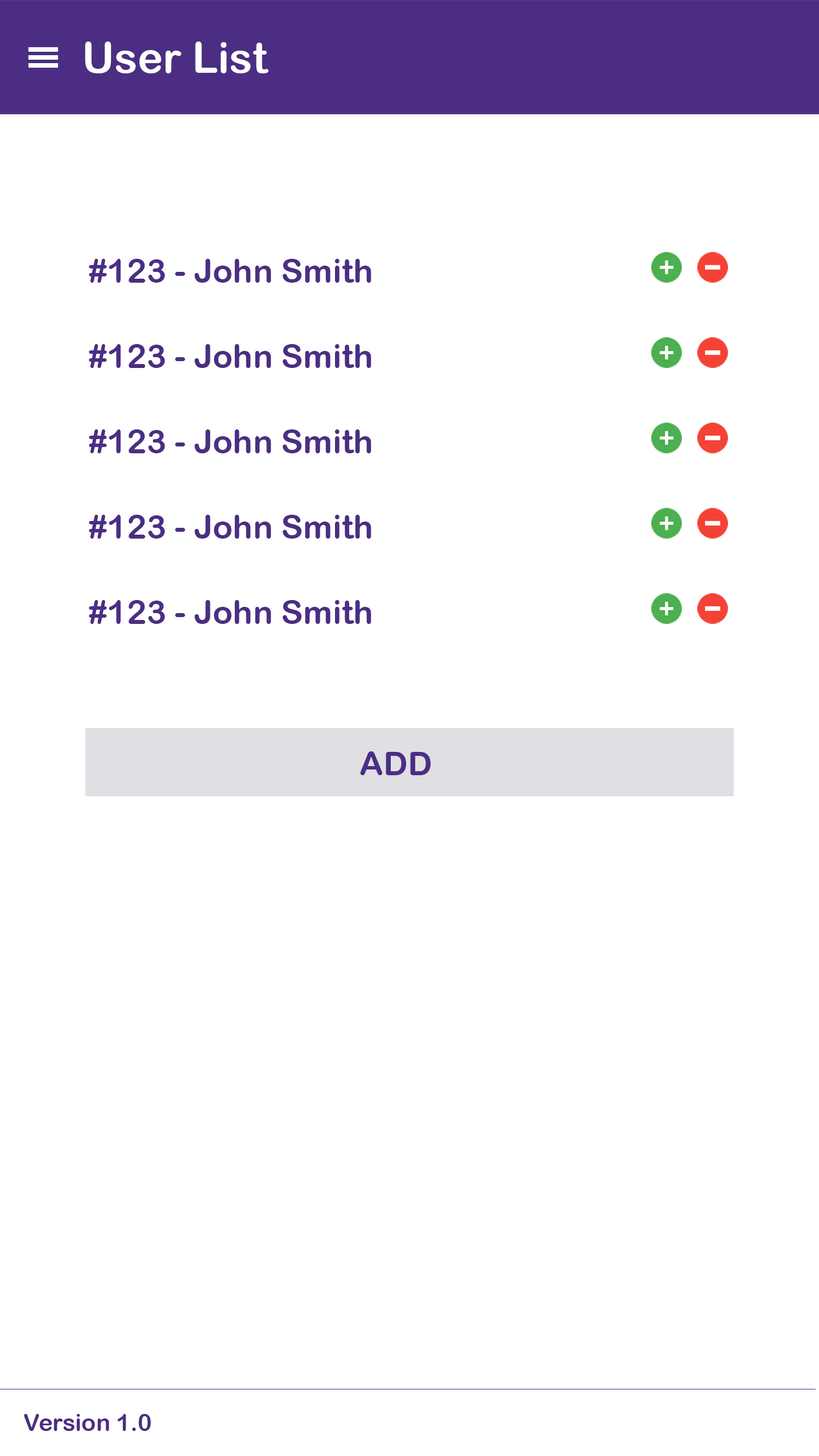
<style>
.page{position:relative;width:819px;height:1456px;background:#ffffff}
.page>*{position:absolute;margin:0}
.t1{font:42.7px "ArialRoundedMTBold";color:#ffffff}
.t2{font:33.2px "ArialRoundedMTBold";color:#4b2e83}
.t3{font:23.7px "ArialRoundedMTBold";color:#4b2e83}
</style>
<div class="page">
<p class="t1" style="left:85px;top:42px;width:183px;height:31px">User List</p>
<p class="t2" style="left:89px;top:259px;width:282px;height:24px">#123 - John Smith</p>
<p class="t2" style="left:89px;top:344px;width:282px;height:24px">#123 - John Smith</p>
<p class="t2" style="left:89px;top:429px;width:282px;height:24px">#123 - John Smith</p>
<p class="t2" style="left:89px;top:515px;width:282px;height:24px">#123 - John Smith</p>
<p class="t2" style="left:89px;top:600px;width:282px;height:24px">#123 - John Smith</p>
<p class="t2" style="left:360px;top:751px;width:71px;height:24px">ADD</p>
<p class="t3" style="left:24px;top:1414px;width:127px;height:17px">Version 1.0</p>
</div>
